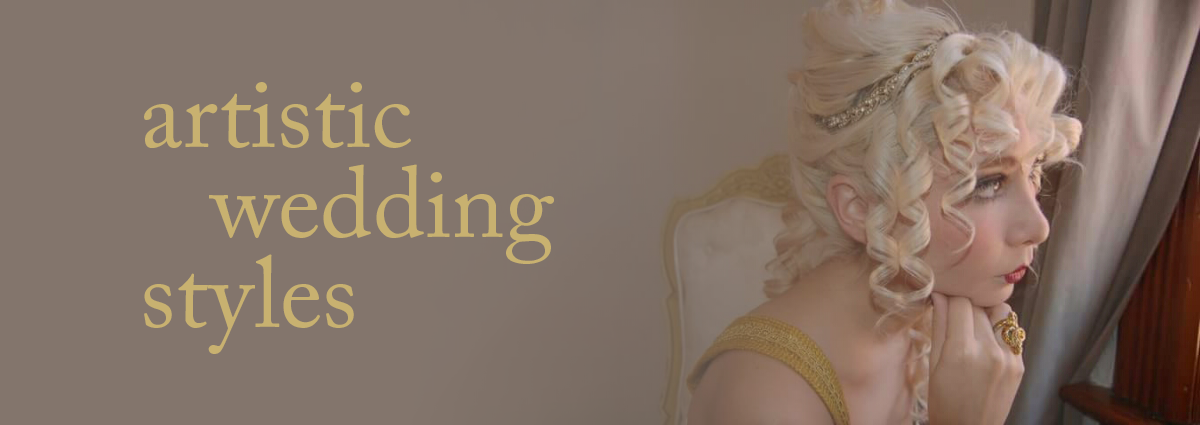
<style>
.page{position:relative;width:1200px;height:425px;background:#83756c}
.page>*{position:absolute;margin:0}
.t1{font:100px/90px "ACaslonPro-Regular";color:#c8b170}
</style>
<div class="page">
<p class="t1" style="left:144px;top:82px;width:410px;height:272px">artistic <br>  wedding <br>styles</p>
</div>
